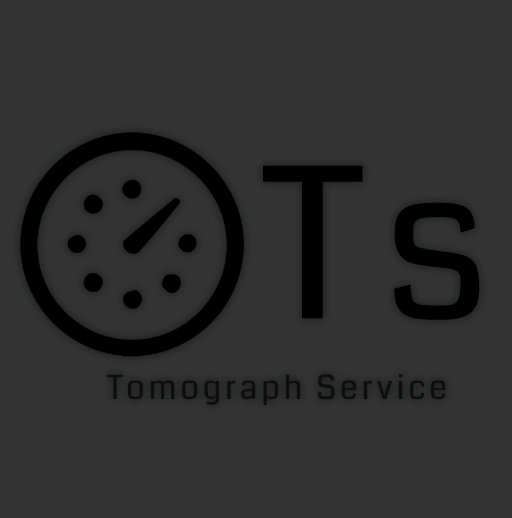
<style>
.page{position:relative;width:512px;height:518px;background:#333333}
.page>*{position:absolute;margin:0}
.t1{font:209.1px "Coda-Regular";letter-spacing:0.107em;color:#000000}
.t2{font:33px "Coda-Regular";letter-spacing:0.107em;color:#0e0e0e}
</style>
<div class="page">
<p class="t1" style="left:263px;top:165px;width:217px;height:155px">Ts</p>
<p class="t2" style="left:107px;top:374px;width:339px;height:32px">Tomograph Service</p>
</div>
